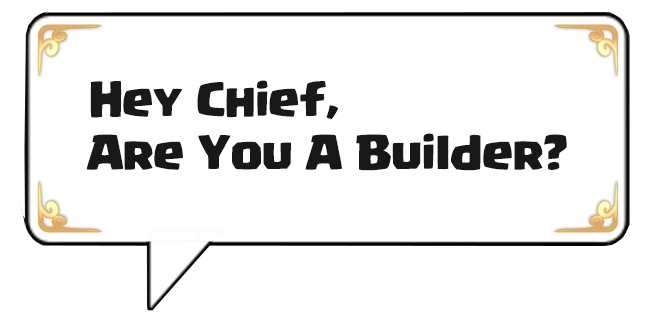
<style>
.page{position:relative;width:655px;height:322px;background:#ffffff}
.page>*{position:absolute;margin:0}
.t1{font:36px "Supercell-Magic";letter-spacing:-0.025em;color:#191919}
.t2{font:36px "Supercell-Magic";letter-spacing:-0.025em;color:#181818}
</style>
<div class="page">
<p class="t1" style="left:90px;top:80px;width:249px;height:39px">Hey Chief,</p>
<p class="t2" style="left:86px;top:133px;width:481px;height:38px">Are You A Builder?</p>
</div>
